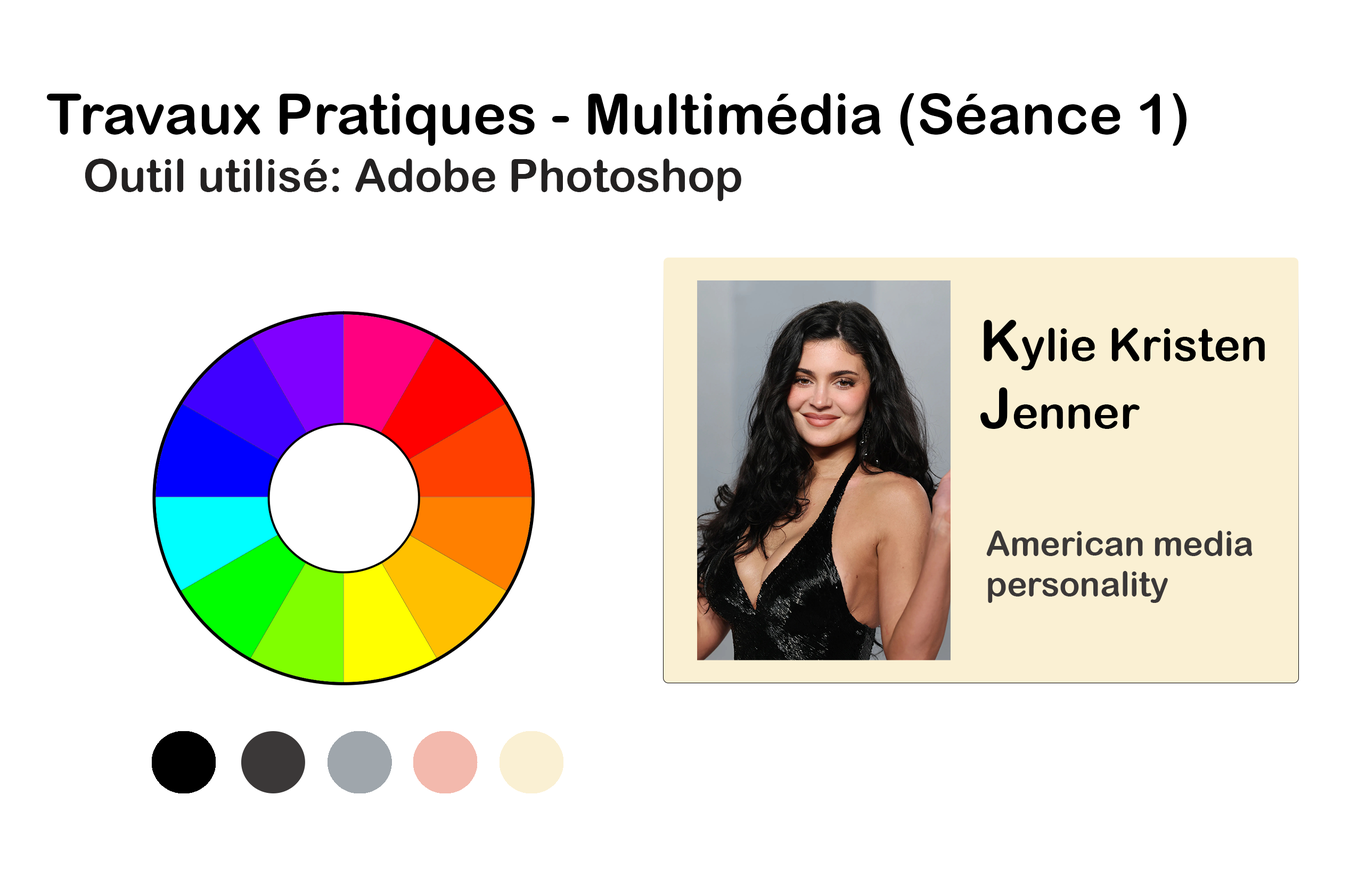
<style>
.page{position:relative;width:1358px;height:878px;background:#ffffff}
.page>*{position:absolute;margin:0}
.t1{font:56.3px "ArialRoundedMTBold";color:#000000}
.t2{font:45.1px "ArialRoundedMTBold";color:#232121}
.t3{font:45.1px "ArialRoundedMTBold";color:#000000}
.t4{font:33.8px "ArialRoundedMTBold";color:#3b3838}
</style>
<div class="page">
<p class="t1" style="left:46px;top:93px;width:1140px;height:53px">Travaux Pratiques - Multimédia (Séance 1)</p>
<p class="t2" style="left:85px;top:159px;width:656px;height:42px">Outil utilisé: Adobe Photoshop</p>
<p class="t3" style="left:980px;top:320px;width:284px;height:109px"><span class="t1">K</span>ylie Kristen<br><span class="t1">J</span>enner</p>
<p class="t4" style="left:986px;top:531px;width:266px;height:72px">American media<br>personality</p>
</div>
